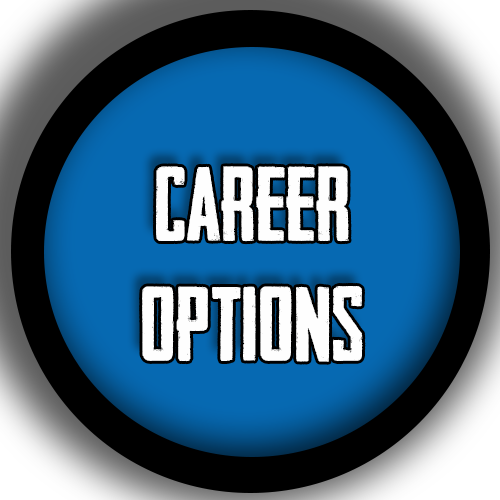
<style>
.page{position:relative;width:500px;height:500px;background:#000000}
.page>*{position:absolute;margin:0}
.t1{font:100px "HeadlinerNo.45";color:#fefefe}
</style>
<div class="page">
<p class="t1" style="left:142px;top:166px;width:221px;height:196px;text-align:center">CAREER<br>OPTIONS</p>
</div>
